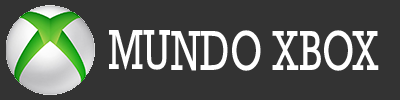
<style>
.page{position:relative;width:400px;height:100px;background:#333333}
.page>*{position:absolute;margin:0}
.t1{font:57.4px "Rockwell";color:#ffffff;scale:0.71 1}
</style>
<div class="page">
<p class="t1" style="left:109px;top:30px;width:270px;height:41px">MUNDO XBOX</p>
</div>
